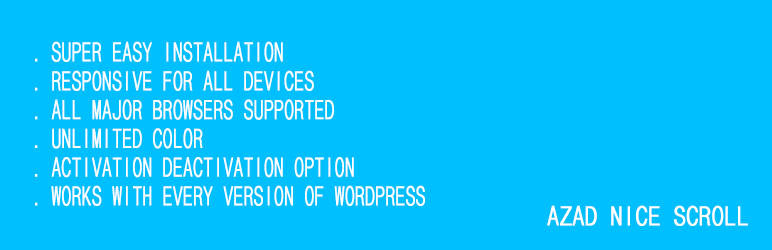
<style>
.page{position:relative;width:772px;height:250px;background:#00bfff}
.page>*{position:absolute;margin:0}
.t1{font:26.2px "DotumChe";color:#ffffff;font-weight:bold;scale:0.73 1}
.t2{font:26.2px "DotumChe";color:#ffffff;text-transform:uppercase;font-weight:bold;scale:0.92 1}
</style>
<div class="page">
<p class="t1" style="left:35px;top:41px;width:390px;height:165px">. SUPER EASY INSTALLATION<br>. RESPONSIVE FOR ALL DEVICES<br>. ALL MAJOR BROWSERS SUPPORTED<br>. UNLIMITED COLOR<br>. ACTIVATION DEACTIVATION OPTION<br>. WORKS WITH EVERY VERSION OF WORDPRESS</p>
<p class="t2" style="left:547px;top:205px;width:201px;height:21px">AZAD NICE SCROLL</p>
</div>
